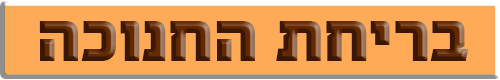
<style>
.page{position:relative;width:500px;height:80px;background:#ffaa56}
.page>*{position:absolute;margin:0}
.t1{font:86.8px "FbHachaluzim-Black"}
</style>
<div class="page">
<p class="t1" style="left:39px;top:21px;width:430px;height:40px">בריחת החנוכה</p>
</div>
